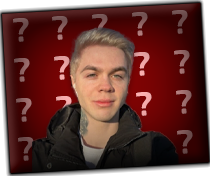
<style>
.page{position:relative;width:210px;height:176px}
.page>*{position:absolute;margin:0}
.t1{font:33.2px "Exo2-Bold"}
</style>
<div class="page">
<p class="t1" style="left:13px;top:10px;width:180px;height:151px;text-align:center;rotate:-3deg">? ? ? ? ?<br>? ? ? ? ?<br>? ? ? ? ?<br>? ? ? ? ?</p>
</div>
